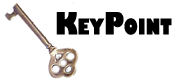
<style>
.page{position:relative;width:179px;height:80px;background:#ffffff}
.page>*{position:absolute;margin:0}
.t1{font:30px "GillSans-UltraBoldCondensed";color:#000000;font-variant:small-caps;scale:1.15 1}
</style>
<div class="page">
<p class="t1" style="left:56px;top:12px;width:116px;height:23px">KeyPoint</p>
</div>
